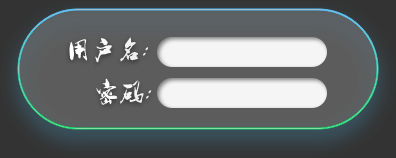
<style>
.page{position:relative;width:396px;height:158px}
.page>*{position:absolute;margin:0}
.t1{font:25px "HuJingLi-Mao";color:#ffffff}
</style>
<div class="page">
<p class="t1" style="left:69px;top:37px;width:80px;height:26px">用户名:</p>
<p class="t1" style="left:96px;top:78px;width:56px;height:27px">密码:</p>
</div>
